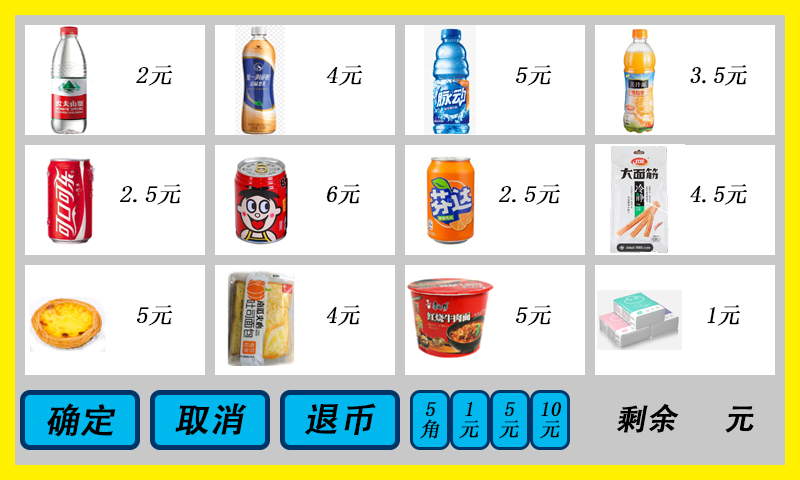
<style>
.page{position:relative;width:800px;height:480px;background:#ffffff}
.page>*{position:absolute;margin:0}
.t1{font:23px "SimSun";color:#000000;text-transform:uppercase;font-weight:bold;font-style:italic;scale:1.04 1}
.t2{font:23px "SimSun";color:#000000;text-transform:uppercase;font-weight:bold;font-style:italic}
.t3{font:20px/20px "SimSun";color:#000000;text-transform:uppercase;font-weight:bold;font-style:italic}
.t4{font:34.4px "AdobeHeitiStd-Regular";color:#000000;font-weight:bold;font-style:italic}
.t5{font:30px "AdobeHeitiStd-Regular";color:#000000;font-weight:bold;font-style:italic}
</style>
<div class="page">
<p class="t1" style="left:136px;top:65px;width:37px;height:21px">2元</p>
<p class="t1" style="left:326px;top:65px;width:37px;height:21px">4元</p>
<p class="t1" style="left:516px;top:65px;width:36px;height:21px">5元</p>
<p class="t2" style="left:690px;top:65px;width:57px;height:21px">3.5元</p>
<p class="t1" style="left:120px;top:184px;width:61px;height:21px">2.5元</p>
<p class="t2" style="left:326px;top:184px;width:34px;height:21px">6元</p>
<p class="t1" style="left:499px;top:184px;width:61px;height:21px">2.5元</p>
<p class="t2" style="left:690px;top:184px;width:57px;height:21px">4.5元</p>
<p class="t1" style="left:137px;top:305px;width:36px;height:21px">5元</p>
<p class="t2" style="left:326px;top:305px;width:34px;height:21px">4元</p>
<p class="t1" style="left:516px;top:305px;width:36px;height:21px">5元</p>
<p class="t2" style="left:707px;top:305px;width:33px;height:21px">1元</p>
<p class="t3" style="left:459px;top:401px;width:20px;height:38px;text-align:center">1<br>元</p>
<p class="t3" style="left:540px;top:401px;width:22px;height:38px;text-align:center">10<br>元</p>
<p class="t4" style="left:47px;top:403px;width:69px;height:34px">确定</p>
<p class="t4" style="left:175px;top:403px;width:72px;height:32px">取消</p>
<p class="t4" style="left:305px;top:403px;width:71px;height:32px">退币</p>
<p class="t3" style="left:420px;top:402px;width:20px;height:37px;text-align:center">5<br>角</p>
<p class="t3" style="left:499px;top:402px;width:20px;height:37px;text-align:center">5<br>元</p>
<p class="t5" style="left:617px;top:404px;width:137px;height:29px">剩余      元</p>
</div>
